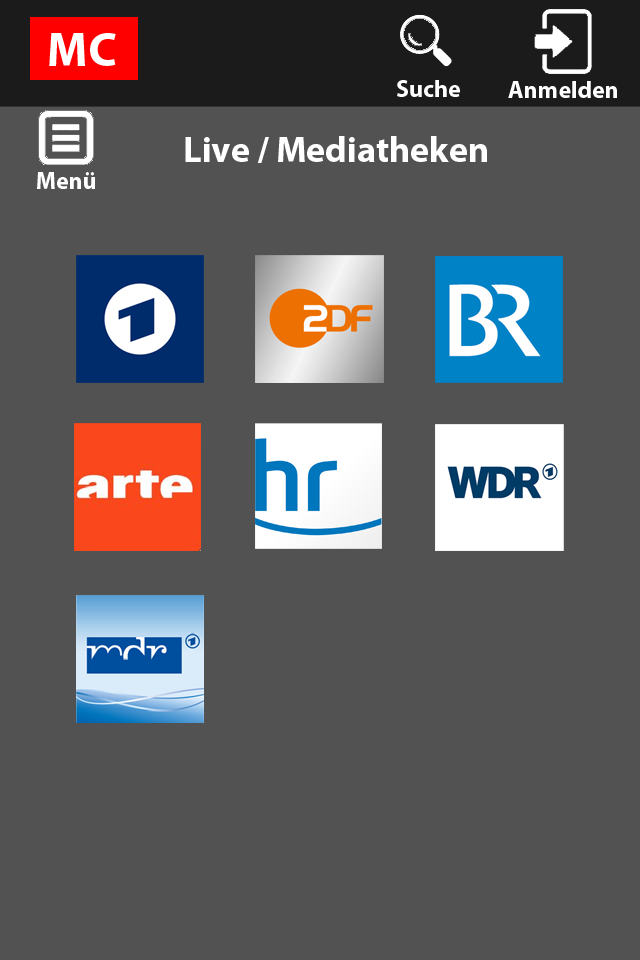
<style>
.page{position:relative;width:640px;height:960px;background:#525252}
.page>*{position:absolute;margin:0}
.t1{font:48px "MyriadPro-Bold";color:#ffffff}
.t2{font:24px "MyriadPro-Bold";color:#ffffff}
.t3{font:36px "MyriadPro-Bold";color:#ffffff}
</style>
<div class="page">
<p class="t1" style="left:49px;top:33px;width:67px;height:33px">MC</p>
<p class="t2" style="left:397px;top:80px;width:63px;height:17px">Suche</p>
<p class="t2" style="left:508px;top:81px;width:109px;height:17px">Anmelden</p>
<p class="t3" style="left:185px;top:136px;width:302px;height:27px">Live / Mediatheken</p>
<p class="t2" style="left:37px;top:172px;width:58px;height:17px">Menü</p>
</div>
